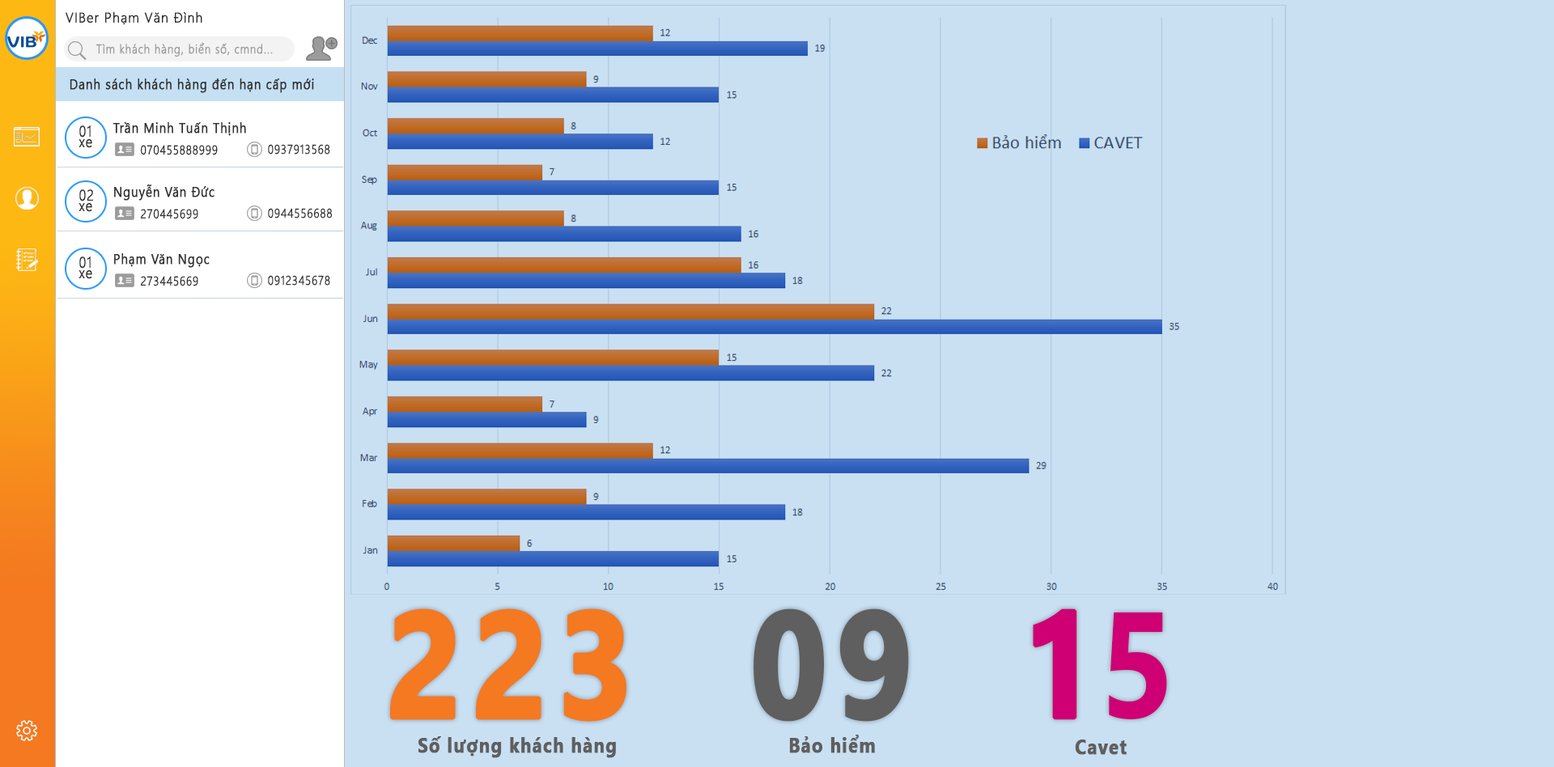
<style>
.page{position:relative;width:1554px;height:767px;background:#c9e0f3}
.page>*{position:absolute;margin:0}
.t1{font:13.8px "SegoeUI-Light";letter-spacing:0.053em;color:#313131;font-weight:bold;scale:0.95 1}
.t2{font:12.5px "SegoeUI-Light";letter-spacing:0.053em;color:#9b9b9b;font-weight:bold;scale:0.87 1}
.t3{font:13.8px "SegoeUI";letter-spacing:0.053em;color:#313131;font-weight:bold;scale:0.87 1}
.t4{font:15px "SegoeUI-Light";letter-spacing:0.053em;color:#313131;font-weight:bold;scale:0.87 1}
.t5{font:12.5px "SegoeUI-Light";letter-spacing:0.053em;color:#313131;font-weight:bold;scale:0.87 1}
.t6{font:150.2px "SegoeUI-Bold";letter-spacing:0.053em;color:#f47920;font-weight:bold;scale:0.87 1}
.t7{font:150.2px "SegoeUI-Bold";letter-spacing:0.053em;color:#5f5f5f;font-weight:bold;scale:0.87 1}
.t8{font:150.2px "SegoeUI-Bold";letter-spacing:-0.005em;color:#ce0074;font-weight:bold;scale:0.87 1}
.t9{font:20px "SegoeUI-Bold";letter-spacing:0.053em;color:#5f5f5f;font-weight:bold;scale:0.87 1}
</style>
<div class="page">
<p class="t1" style="left:66px;top:11px;width:136px;height:14px">VIBer Phạm Văn Đình</p>
<p class="t2" style="left:96px;top:42px;width:177px;height:15px">Tìm khách hàng, biển số, cmnd...</p>
<p class="t3" style="left:70px;top:79px;width:244px;height:14px">Danh sách khách hàng đến hạn cấp mới</p>
<p class="t4" style="left:79px;top:125px;width:12px;height:13px">01</p>
<p class="t3" style="left:113px;top:122px;width:133px;height:14px">Trần Minh Tuấn Thịnh</p>
<p class="t4" style="left:79px;top:139px;width:13px;height:9px">xe</p>
<p class="t5" style="left:141px;top:145px;width:77px;height:10px">070455888999</p>
<p class="t5" style="left:268px;top:144px;width:62px;height:11px">0937913568</p>
<p class="t3" style="left:114px;top:185px;width:100px;height:16px">Nguyễn Văn Đức</p>
<p class="t4" style="left:79px;top:189px;width:14px;height:13px">02</p>
<p class="t4" style="left:79px;top:203px;width:13px;height:9px">xe</p>
<p class="t5" style="left:141px;top:209px;width:57px;height:10px">270445699</p>
<p class="t5" style="left:268px;top:208px;width:64px;height:11px">0944556688</p>
<p class="t4" style="left:79px;top:257px;width:12px;height:12px">01</p>
<p class="t3" style="left:114px;top:253px;width:96px;height:15px">Phạm Văn Ngọc</p>
<p class="t4" style="left:79px;top:270px;width:13px;height:9px">xe</p>
<p class="t5" style="left:141px;top:276px;width:57px;height:11px">273445669</p>
<p class="t5" style="left:268px;top:275px;width:62px;height:11px">0912345678</p>
<p class="t6" style="left:390px;top:609px;width:236px;height:113px">223</p>
<p class="t7" style="left:754px;top:609px;width:155px;height:113px">09</p>
<p class="t8" style="left:1033px;top:609px;width:134px;height:111px">15</p>
<p class="t9" style="left:418px;top:737px;width:198px;height:21px">Số lượng khách hàng</p>
<p class="t9" style="left:789px;top:735px;width:86px;height:19px">Bảo hiểm</p>
<p class="t9" style="left:1075px;top:740px;width:52px;height:15px">Cavet</p>
</div>
